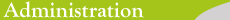
<style>
.page{position:relative;width:230px;height:20px;background:#a5c51a}
.page>*{position:absolute;margin:0}
.t1{font:22.2px "GoudyOldStyleT-Bold";color:#ffffff}
</style>
<div class="page">
<p class="t1" style="left:3px;top:1px;width:141px;height:17px">Administration</p>
</div>
